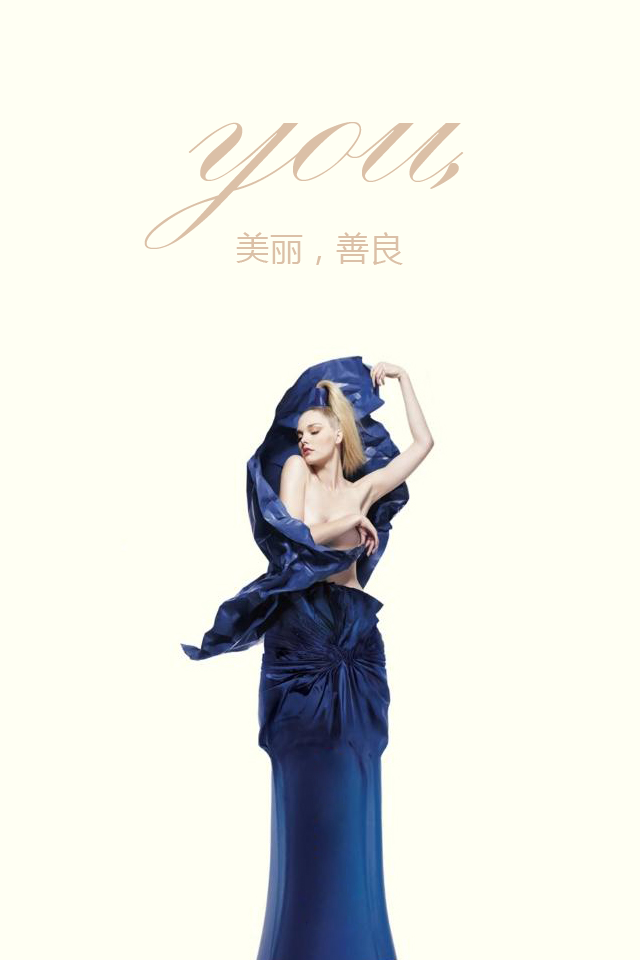
<style>
.page{position:relative;width:640px;height:960px;background:#fffff3}
.page>*{position:absolute;margin:0}
.t1{font:300px "KunstlerScript";color:#dbc0a7}
.t2{font:33.3px "MicrosoftYaHei";color:#dbc0a7}
</style>
<div class="page">
<p class="t1" style="left:144px;top:122px;width:320px;height:127px">you,</p>
<p class="t2" style="left:236px;top:232px;width:167px;height:33px">美丽，善良</p>
</div>
